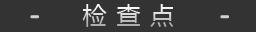
<style>
.page{position:relative;width:256px;height:32px;background:#333333}
.page>*{position:absolute;margin:0}
.t1{font:24px "MicrosoftYaHei";letter-spacing:0.4em}
</style>
<div class="page">
<p class="t1" style="left:82px;top:4px;width:91px;height:23px">检查点</p>
</div>
